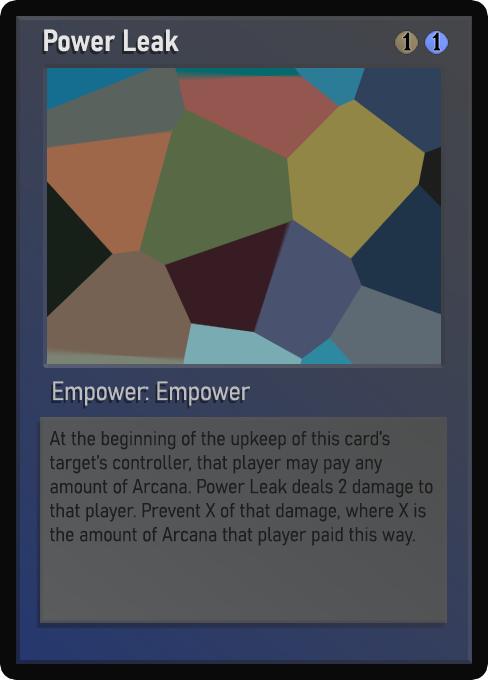
<style>
.page{position:relative;width:488px;height:680px}
.page>*{position:absolute;margin:0}
.t1{font:30px "Bahnschrift-SemiBoldSemiCondensed";color:#f2f2f2;font-weight:bold}
.t2{font:25px "WTRRoycroft";color:#000000;font-weight:bold;scale:1.09 1}
.t3{font:26px "Bahnschrift-LightSemiCondensed";color:#c8c8c8;font-weight:bold}
.t4{font:20px "Bahnschrift-LightSemiCondensed";color:#1e1e1e;font-weight:bold}
</style>
<div class="page">
<p class="t1" style="left:44px;top:29px;width:135px;height:23px;opacity:0.9">Power Leak</p>
<p class="t2" style="left:403px;top:32px;width:8px;height:19px">1</p>
<p class="t2" style="left:432px;top:32px;width:9px;height:19px">1</p>
<p class="t3" style="left:53px;top:381px;width:197px;height:25px;opacity:0.9">Empower: Empower</p>
<p class="t4" style="left:49px;top:431px;width:384px;height:115px">At the beginning of the upkeep of this card’s target’s controller, that player may pay any amount of Arcana. Power Leak deals 2 damage to that player. Prevent X of that damage, where X is the amount of Arcana that player paid this way.</p>
</div>
